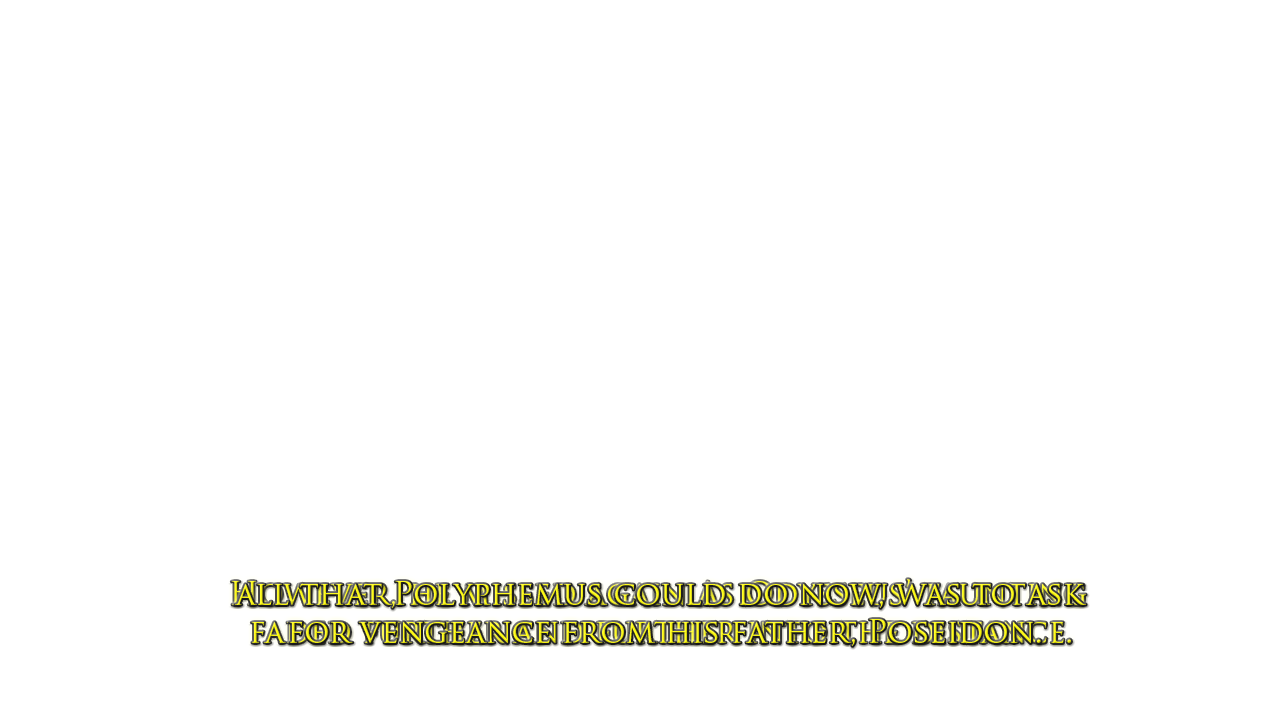
<style>
.page{position:relative;width:1280px;height:720px;background:#ffffff}
.page>*{position:absolute;margin:0}
.t1{font:31.8px "TrajanPro-Regular"}
.t2{font:31.7px "TrajanPro-Regular";color:#fffc14}
</style>
<div class="page">
<p class="t1" style="left:231px;top:579px;width:855px;height:65px">However, he missed again As Odysseus’ taunting<br>  faded further and further into the distance.</p>
<p class="t2" style="left:235px;top:581px;width:851px;height:65px">all that Polyphemus could do now, was to ask<br>     for vengeance from his father, Poseidon.</p>
</div>
